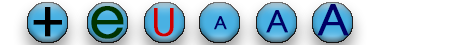
<style>
.page{position:relative;width:456px;height:45px;background:#ffffff}
.page>*{position:absolute;margin:0}
.t1{font:54.2px "URWGothic-Book";color:#003300;font-weight:bold}
.t2{font:41.7px "URWGothic-Book";color:#000066;font-weight:bold}
.t3{font:54.2px "URWGothic-Book";color:#000000;font-weight:bold}
.t4{font:37.5px "URWGothic-Book";color:#cc0000;font-weight:bold}
.t5{font:16.7px "URWGothic-Book";color:#000066;font-weight:bold}
.t6{font:29.2px "URWGothic-Book";color:#000066;font-weight:bold}
</style>
<div class="page">
<p class="t1" style="left:91px;top:6px;width:33px;height:33px">e</p>
<p class="t2" style="left:317px;top:4px;width:32px;height:32px">A</p>
<p class="t3" style="left:33px;top:7px;width:29px;height:30px">+</p>
<p class="t4" style="left:154px;top:8px;width:20px;height:29px">U</p>
<p class="t5" style="left:214px;top:16px;width:13px;height:14px">A</p>
<p class="t6" style="left:266px;top:10px;width:22px;height:23px">A</p>
</div>
